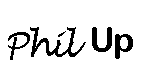
<style>
.page{position:relative;width:150px;height:78px;background:#ffffff}
.page>*{position:absolute;margin:0}
.t1{font:35px "LucidaHandwriting-Italic";letter-spacing:-0.06em;color:#000000}
.t2{font:35px "ArialRoundedMTBold";letter-spacing:-0.06em;color:#000000}
</style>
<div class="page">
<p class="t1" style="left:8px;top:27px;width:78px;height:33px">Phil</p>
<p class="t2" style="left:92px;top:27px;width:41px;height:32px">Up</p>
</div>
